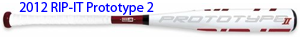
<style>
.page{position:relative;width:300px;height:37px;background:#fefefe}
.page>*{position:absolute;margin:0}
.t1{font:14px "MyriadPro-Regular";color:#0000ff}
</style>
<div class="page">
<p class="t1" style="left:19px;top:2px;width:135px;height:13px">2012 RIP-IT Prototype 2</p>
</div>
